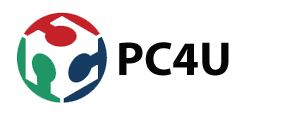
<style>
.page{position:relative;width:300px;height:120px;background:#ffffff}
.page>*{position:absolute;margin:0}
.t1{font:48px "MyriadPro-Bold";color:#050505}
</style>
<div class="page">
<p class="t1" style="left:119px;top:42px;width:110px;height:34px">PC4U</p>
</div>
